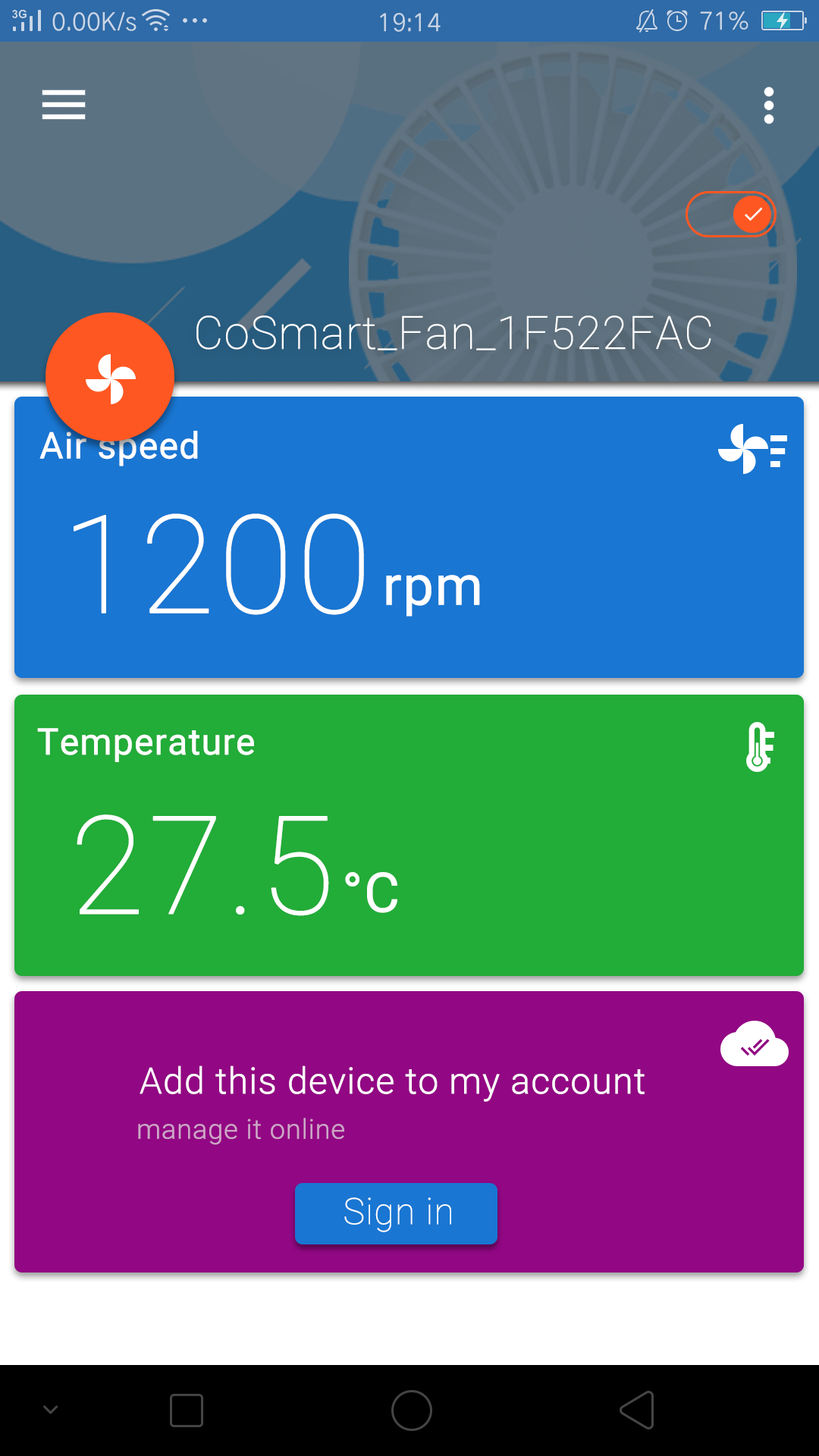
<style>
.page{position:relative;width:819px;height:1456px}
.page>*{position:absolute;margin:0}
.t1{font:45.5px "Roboto-Thin";color:#ffffff;font-weight:bold}
.t2{font:36.4px "Roboto-Regular";color:#ffffff;font-weight:bold}
.t3{font:136.5px "Roboto-Thin";color:#ffffff;font-weight:bold}
.t4{font:54.6px "Roboto-Regular";color:#ffffff;font-weight:bold}
.t5{font:36.4px "Roboto-Light";color:#ffffff;font-weight:bold}
.t6{font:27.3px "Roboto-Light";color:#cda5c7;font-weight:bold}
.t7{font:36.4px "Roboto-Thin";color:#ffffff;font-weight:bold}
</style>
<div class="page">
<p class="t1" style="left:196px;top:315px;width:515px;height:35px">CoSmart_Fan_1F522FAC</p>
<p class="t2" style="left:39px;top:431px;width:159px;height:35px">Air speed</p>
<p class="t3" style="left:74px;top:513px;width:290px;height:102px">1200</p>
<p class="t4" style="left:386px;top:575px;width:94px;height:42px">rpm</p>
<p class="t2" style="left:37px;top:728px;width:217px;height:34px">Temperature</p>
<p class="t3" style="left:77px;top:814px;width:252px;height:102px">27.5</p>
<p class="t4" style="left:345px;top:872px;width:52px;height:41px">°C</p>
<p class="t5" style="left:140px;top:1065px;width:505px;height:37px">Add this device to my account</p>
<p class="t6" style="left:138px;top:1118px;width:206px;height:27px">manage it online</p>
<p class="t7" style="left:344px;top:1197px;width:107px;height:35px">Sign in</p>
</div>
